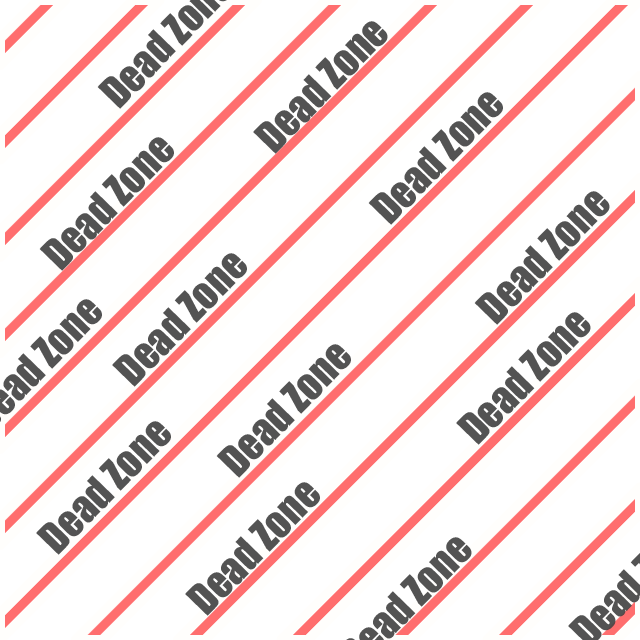
<style>
.page{position:relative;width:640px;height:640px;background:#ffffff}
.page>*{position:absolute;margin:0}
.t1{font:39.9px "Impact";color:#424242}
</style>
<div class="page">
<p class="t1" style="left:253px;top:21px;width:135px;height:133px;rotate:-46deg;opacity:0.91">Dead Zone</p>
<p class="t1" style="left:368px;top:92px;width:135px;height:133px;rotate:-46deg;opacity:0.91">Dead Zone</p>
<p class="t1" style="left:39px;top:137px;width:135px;height:134px;rotate:-46deg;opacity:0.91">Dead Zone</p>
<p class="t1" style="left:474px;top:191px;width:136px;height:134px;rotate:-46deg;opacity:0.91">Dead Zone</p>
<p class="t1" style="left:112px;top:253px;width:135px;height:134px;rotate:-46deg;opacity:0.91">Dead Zone</p>
<p class="t1" style="left:456px;top:312px;width:135px;height:133px;rotate:-46deg;opacity:0.91">Dead Zone</p>
<p class="t1" style="left:216px;top:344px;width:135px;height:134px;rotate:-46deg;opacity:0.91">Dead Zone</p>
<p class="t1" style="left:36px;top:421px;width:135px;height:134px;rotate:-46deg;opacity:0.91">Dead Zone</p>
<p class="t1" style="left:185px;top:482px;width:135px;height:134px;rotate:-46deg;opacity:0.91">Dead Zone</p>
</div>
